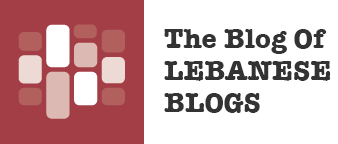
<style>
.page{position:relative;width:338px;height:144px;background:#ffffff}
.page>*{position:absolute;margin:0}
.t1{font:28px/32px "AmericanTypewriter-Bold";color:#333333}
</style>
<div class="page">
<p class="t1" style="left:164px;top:29px;width:167px;height:84px">The Blog Of<br>LEBANESE<br>BLOGS</p>
</div>
